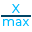
<style>
.page{position:relative;width:32px;height:32px;background:#ffffff}
.page>*{position:absolute;margin:0}
.t1{font:12px "Montserrat-Regular";letter-spacing:0.04em;color:#00bbff}
</style>
<div class="page">
<p class="t1" style="left:12px;top:4px;width:8px;height:9px">X</p>
<p class="t1" style="left:3px;top:19px;width:26px;height:7px">max</p>
</div>
